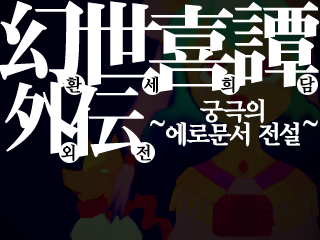
<style>
.page{position:relative;width:320px;height:240px;background:#ffffff}
.page>*{position:absolute;margin:0}
.t1{font:17.7px "YeolrinMyeongjo-Bold";letter-spacing:-0.05em;color:#000000}
.t2{font:25.3px/23.2px "YeolrinMyeongjo-Bold";letter-spacing:-0.05em;color:#ffffff}
</style>
<div class="page">
<p class="t1" style="left:65px;top:76px;width:17px;height:17px">환</p>
<p class="t1" style="left:144px;top:76px;width:15px;height:18px">세</p>
<p class="t1" style="left:221px;top:76px;width:14px;height:18px">희</p>
<p class="t1" style="left:299px;top:76px;width:16px;height:17px">담</p>
<p class="t2" style="left:166px;top:98px;width:134px;height:49px;text-align:center">궁극의<br>에로문서 전설</p>
<p class="t1" style="left:61px;top:144px;width:14px;height:18px">외</p>
<p class="t1" style="left:136px;top:144px;width:15px;height:17px">전</p>
</div>
